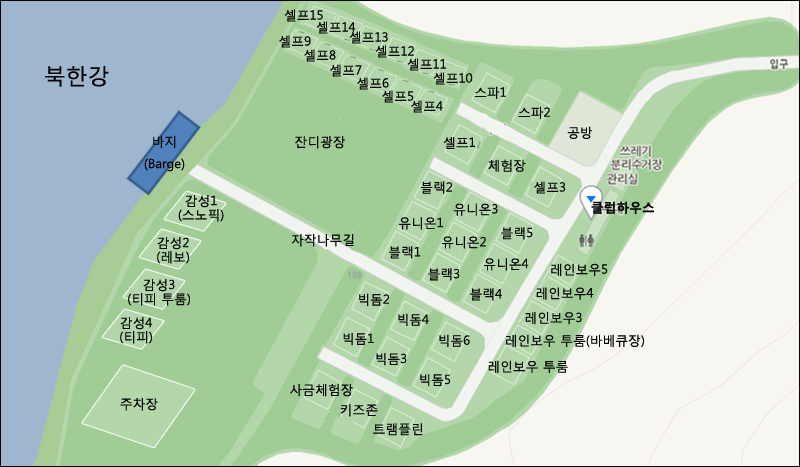
<style>
.page{position:relative;width:800px;height:467px;background:#a1cc96}
.page>*{position:absolute;margin:0}
.t1{font:12.8px "MalgunGothicRegular";color:#000000}
.t2{font:21.9px "MalgunGothicRegular";color:#000000}
.t3{font:12.8px/14px "MalgunGothicRegular";color:#000000}
.t4{font:12.8px "MalgunGothicBold";color:#000000}
</style>
<div class="page">
<p class="t1" style="left:284px;top:9px;width:39px;height:13px">셀프15</p>
<p class="t1" style="left:316px;top:21px;width:40px;height:13px">셀프14</p>
<p class="t1" style="left:279px;top:35px;width:32px;height:13px">셀프9</p>
<p class="t1" style="left:349px;top:31px;width:39px;height:13px">셀프13</p>
<p class="t1" style="left:304px;top:49px;width:32px;height:13px">셀프8</p>
<p class="t1" style="left:375px;top:45px;width:39px;height:13px">셀프12</p>
<p class="t1" style="left:330px;top:64px;width:32px;height:13px">셀프7</p>
<p class="t1" style="left:407px;top:58px;width:39px;height:13px">셀프11</p>
<p class="t2" style="left:45px;top:66px;width:64px;height:21px">북한강</p>
<p class="t1" style="left:357px;top:77px;width:32px;height:13px">셀프6</p>
<p class="t1" style="left:433px;top:72px;width:40px;height:13px">셀프10</p>
<p class="t1" style="left:474px;top:86px;width:32px;height:13px">스파1</p>
<p class="t1" style="left:382px;top:90px;width:32px;height:13px">셀프5</p>
<p class="t1" style="left:411px;top:100px;width:32px;height:13px">셀프4</p>
<p class="t1" style="left:518px;top:106px;width:32px;height:13px">스파2</p>
<p class="t1" style="left:567px;top:126px;width:25px;height:13px">공방</p>
<p class="t1" style="left:144px;top:135px;width:41px;height:37px;text-align:center">바지<br>(Barge)</p>
<p class="t1" style="left:295px;top:136px;width:50px;height:13px">잔디광장</p>
<p class="t1" style="left:443px;top:137px;width:32px;height:12px">셀프1</p>
<p class="t1" style="left:488px;top:159px;width:38px;height:13px">체험장</p>
<p class="t1" style="left:421px;top:181px;width:31px;height:13px">블랙2</p>
<p class="t1" style="left:534px;top:181px;width:32px;height:13px">셀프3</p>
<p class="t3" style="left:178px;top:195px;width:46px;height:27px;text-align:center">감성1<br>(스노픽)</p>
<p class="t1" style="left:453px;top:203px;width:45px;height:13px">유니온3</p>
<p class="t4" style="left:591px;top:201px;width:63px;height:13px">클럽하우스</p>
<p class="t1" style="left:399px;top:217px;width:44px;height:13px">유니온1</p>
<p class="t1" style="left:501px;top:227px;width:32px;height:13px">블랙5</p>
<p class="t3" style="left:157px;top:237px;width:32px;height:27px;text-align:center">감성2<br>(레보)</p>
<p class="t1" style="left:291px;top:234px;width:63px;height:13px">자작나무길</p>
<p class="t1" style="left:389px;top:246px;width:32px;height:13px">블랙1</p>
<p class="t1" style="left:442px;top:236px;width:44px;height:13px">유니온2</p>
<p class="t1" style="left:428px;top:268px;width:32px;height:13px">블랙3</p>
<p class="t1" style="left:484px;top:258px;width:45px;height:13px">유니온4</p>
<p class="t1" style="left:551px;top:263px;width:57px;height:13px">레인보우5</p>
<p class="t3" style="left:128px;top:279px;width:62px;height:27px;text-align:center">감성3<br>(티피 투룸)</p>
<p class="t1" style="left:359px;top:293px;width:30px;height:13px">빅돔2</p>
<p class="t1" style="left:470px;top:288px;width:32px;height:13px">블랙4</p>
<p class="t1" style="left:536px;top:287px;width:58px;height:13px">레인보우4</p>
<p class="t3" style="left:120px;top:317px;width:32px;height:27px;text-align:center">감성4<br>(티피)</p>
<p class="t1" style="left:398px;top:313px;width:31px;height:13px">빅돔4</p>
<p class="t1" style="left:525px;top:312px;width:57px;height:13px">레인보우3</p>
<p class="t1" style="left:343px;top:333px;width:31px;height:13px">빅돔1</p>
<p class="t1" style="left:439px;top:334px;width:31px;height:13px">빅돔6</p>
<p class="t1" style="left:506px;top:334px;width:138px;height:13px">레인보우 투룸(바베큐장)</p>
<p class="t1" style="left:376px;top:353px;width:31px;height:13px">빅돔3</p>
<p class="t1" style="left:488px;top:360px;width:80px;height:13px">레인보우 투룸</p>
<p class="t1" style="left:420px;top:374px;width:31px;height:13px">빅돔5</p>
<p class="t1" style="left:290px;top:384px;width:63px;height:13px">사금체험장</p>
<p class="t1" style="left:120px;top:398px;width:38px;height:13px">주차장</p>
<p class="t1" style="left:340px;top:404px;width:38px;height:13px">키즈존</p>
<p class="t1" style="left:373px;top:423px;width:50px;height:13px">트램플린</p>
</div>
